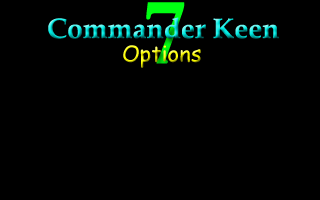
<style>
.page{position:relative;width:320px;height:200px;background:#000000}
.page>*{position:absolute;margin:0}
.t1{font:96px "Garamond-Bold";color:#00ff12}
.t2{font:28px "PalatinoLinotype-Bold"}
.t3{font:22px "ComicSansMS"}
</style>
<div class="page">
<p class="t1" style="left:146px;top:2px;width:39px;height:62px">7</p>
<p class="t2" style="left:48px;top:17px;width:231px;height:22px">Commander Keen</p>
<p class="t3" style="left:123px;top:45px;width:78px;height:23px">Options</p>
</div>
